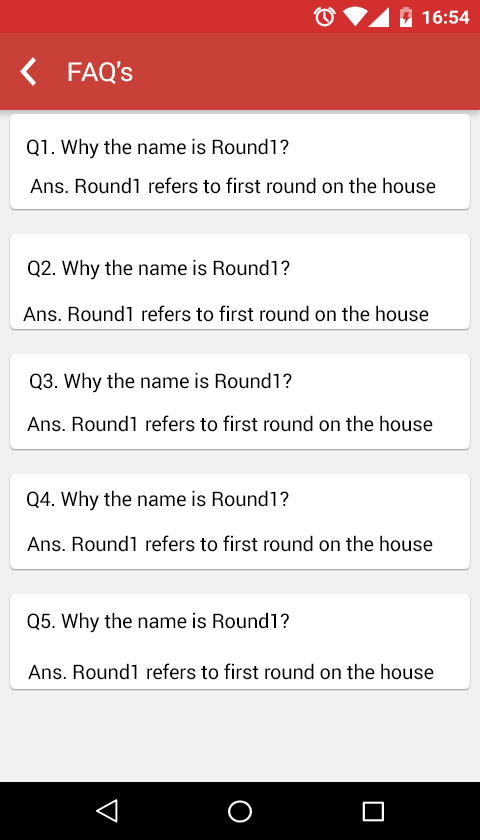
<style>
.page{position:relative;width:480px;height:840px;background:#ffffff}
.page>*{position:absolute;margin:0}
.t1{font:26.1px "Roboto-Regular";letter-spacing:-0.01em;color:#ffffff;scale:1.03 1}
.t2{font:20px "Roboto-Regular";letter-spacing:-0.01em;color:#000000}
</style>
<div class="page">
<p class="t1" style="left:68px;top:61px;width:65px;height:23px">FAQ's</p>
<p class="t2" style="left:27px;top:138px;width:262px;height:21px">Q1. Why the name is Round1?</p>
<p class="t2" style="left:30px;top:177px;width:406px;height:17px">Ans. Round1 refers to first round on the house</p>
<p class="t2" style="left:28px;top:259px;width:262px;height:21px">Q2. Why the name is Round1?</p>
<p class="t2" style="left:23px;top:305px;width:406px;height:17px">Ans. Round1 refers to first round on the house</p>
<p class="t2" style="left:30px;top:372px;width:262px;height:21px">Q3. Why the name is Round1?</p>
<p class="t2" style="left:27px;top:415px;width:406px;height:17px">Ans. Round1 refers to first round on the house</p>
<p class="t2" style="left:27px;top:490px;width:262px;height:21px">Q4. Why the name is Round1?</p>
<p class="t2" style="left:27px;top:535px;width:406px;height:17px">Ans. Round1 refers to first round on the house</p>
<p class="t2" style="left:27px;top:612px;width:262px;height:21px">Q5. Why the name is Round1?</p>
<p class="t2" style="left:28px;top:663px;width:406px;height:17px">Ans. Round1 refers to first round on the house</p>
</div>
